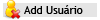
<style>
.page{position:relative;width:100px;height:20px;background:#e5e5e5}
.page>*{position:absolute;margin:0}
.t1{font:11px "TrebuchetMS";color:#000000}
</style>
<div class="page">
<p class="t1" style="left:24px;top:5px;width:59px;height:9px">Add Usuário</p>
</div>
